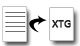
<style>
.page{position:relative;width:80px;height:46px;background:#ffffff}
.page>*{position:absolute;margin:0}
.t1{font:10px "MalgunGothicRegular";color:#1e1e1e;font-weight:bold}
</style>
<div class="page">
<p class="t1" style="left:52px;top:20px;width:19px;height:8px">XTG</p>
</div>
